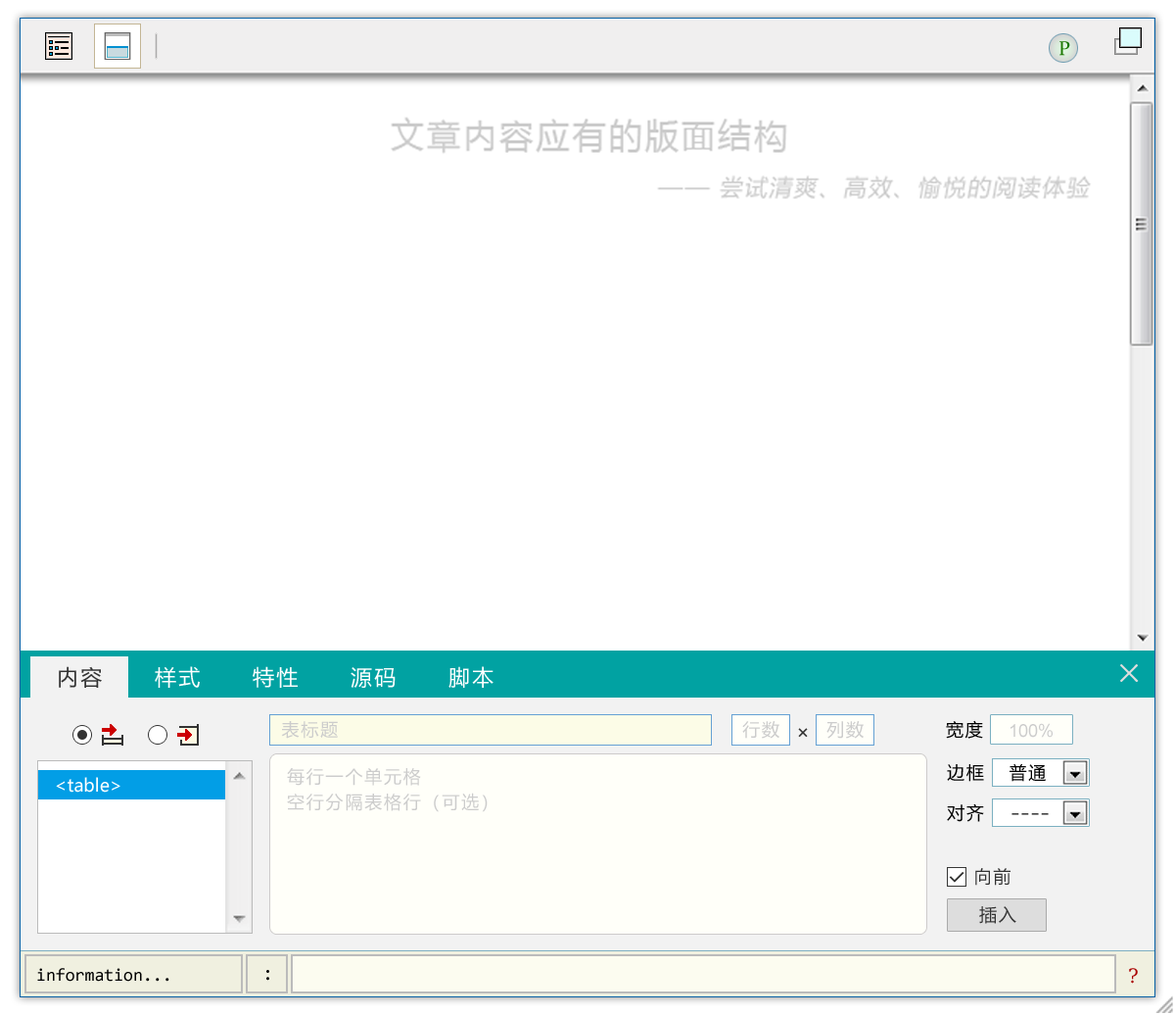
<style>
.page{position:relative;width:1175px;height:1015px;background:#ffffff}
.page>*{position:absolute;margin:0}
.t1{font:19.6px "Constantia";color:#1b7802}
.t2{font:21.5px "MicrosoftYaHei";letter-spacing:0.1em;color:#333333}
.t3{font:21.5px "MicrosoftYaHei";letter-spacing:0.1em;color:#ffffff}
.t4{font:27.4px "NSimSun";letter-spacing:0.1em;color:#dddddd;font-weight:bold}
.t5{font:17.6px "MicrosoftYaHei";letter-spacing:0.1em;color:#cccccc}
.t6{font:17.6px "MicrosoftYaHei";letter-spacing:0.1em;color:#000000}
.t7{font:17.6px "ArialMT";color:#cccccc}
.t8{font:19.6px "DejaVuSansMono";letter-spacing:0.1em;color:#333333}
.t9{font:17.6px/25.5px "MicrosoftYaHei";letter-spacing:0.1em;color:#cccccc}
.t10{font:17.6px "MicrosoftYaHei";color:#ffffff}
.t11{font:17.6px "Courier"}
.t12{font:17.6px "MicrosoftYaHei";letter-spacing:0.1em;color:#333333}
.t13{font:17.6px "Consolas";color:#000000}
.t14{font:19.6px "Consolas";color:#000000}
.t15{font:19.6px "DejaVuSerif";color:#aa0000}
</style>
<div class="page">
<p class="t1" style="left:1060px;top:41px;width:10px;height:15px">P</p>
<p class="t2" style="left:59px;top:666px;width:43px;height:22px">内容</p>
<p class="t3" style="left:155px;top:666px;width:45px;height:22px">样式</p>
<p class="t3" style="left:253px;top:666px;width:45px;height:22px">特性</p>
<p class="t3" style="left:449px;top:666px;width:45px;height:22px">脚本</p>
<p class="t4" style="left:1120px;top:664px;width:19px;height:18px">×</p>
<p class="t3" style="left:351px;top:667px;width:45px;height:21px">源码</p>
<p class="t5" style="left:281px;top:721px;width:57px;height:17px">表标题</p>
<p class="t5" style="left:742px;top:721px;width:38px;height:17px">行数</p>
<p class="t5" style="left:827px;top:721px;width:37px;height:17px">列数</p>
<p class="t6" style="left:946px;top:720px;width:37px;height:18px">宽度</p>
<p class="t7" style="left:1011px;top:723px;width:42px;height:14px">100%</p>
<p class="t8" style="left:798px;top:728px;width:10px;height:9px">×</p>
<p class="t9" style="left:287px;top:768px;width:201px;height:44px">每行一个单元格<br>空行分隔表格行（可选）</p>
<p class="t6" style="left:947px;top:764px;width:37px;height:18px">边框</p>
<p class="t6" style="left:1010px;top:763px;width:36px;height:19px">普通</p>
<p class="t10" style="left:56px;top:777px;width:64px;height:15px">&lt;table&gt;</p>
<p class="t6" style="left:947px;top:803px;width:37px;height:19px">对齐</p>
<p class="t11" style="left:1012px;top:813px;width:37px;height:2px">----</p>
<p class="t12" style="left:975px;top:868px;width:36px;height:17px">向前</p>
<p class="t12" style="left:979px;top:906px;width:38px;height:18px">插入</p>
<p class="t13" style="left:37px;top:968px;width:132px;height:13px">information...</p>
<p class="t14" style="left:266px;top:970px;width:3px;height:10px">:</p>
<p class="t15" style="left:1129px;top:968px;width:9px;height:15px">?</p>
</div>
